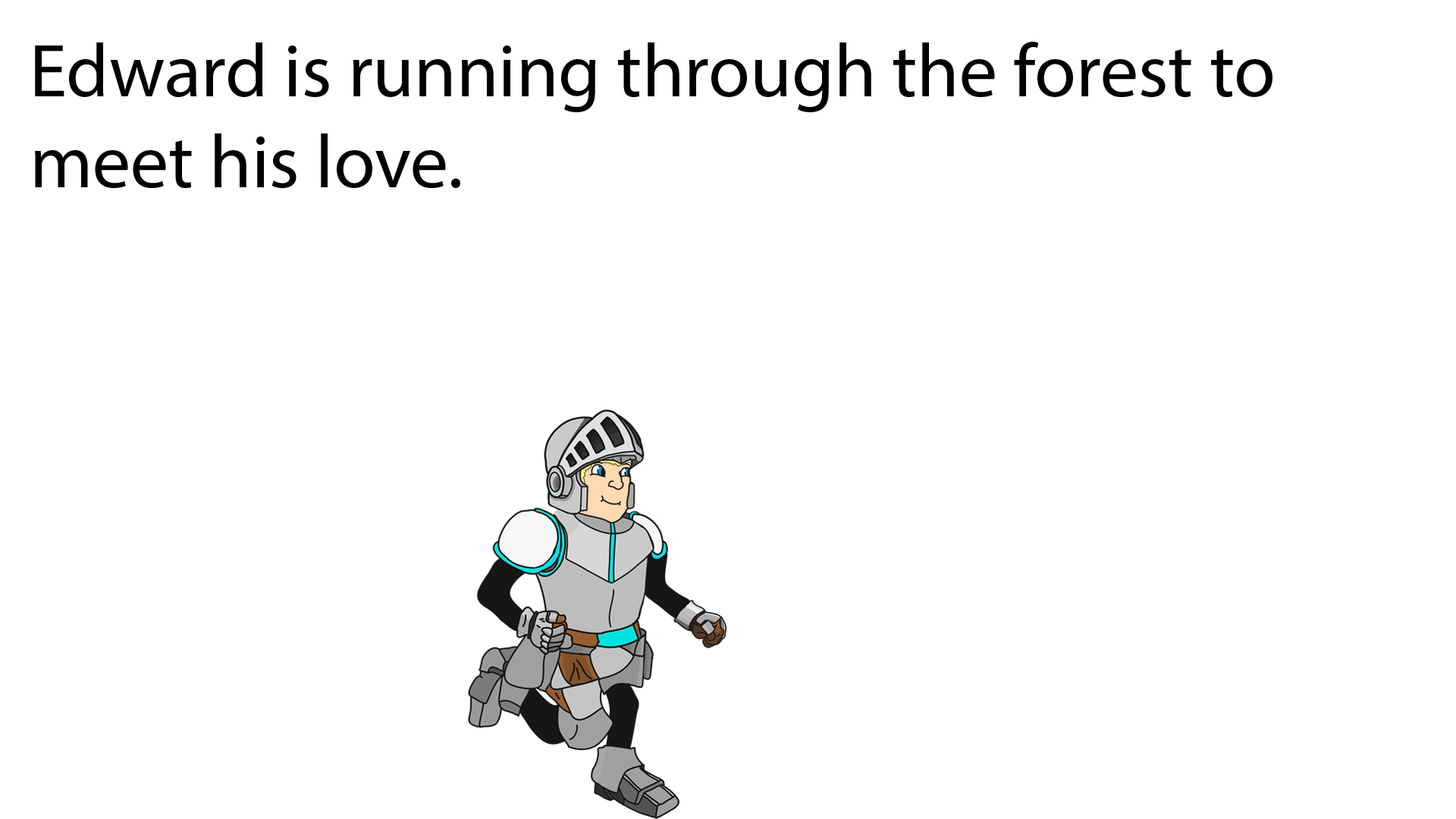
<style>
.page{position:relative;width:1456px;height:819px;background:#ffffff}
.page>*{position:absolute;margin:0}
.t1{font:75.8px "MyriadPro-Regular";color:#000000}
</style>
<div class="page">
<p class="t1" style="left:35px;top:42px;width:1237px;height:146px">Edward is running through the forest to meet his love.</p>
</div>
